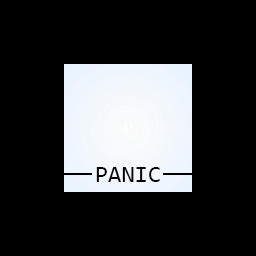
<style>
.page{position:relative;width:256px;height:256px;background:#000000}
.page>*{position:absolute;margin:0}
.t1{font:24px "Consolas";color:#000000}
</style>
<div class="page">
<p class="t1" style="left:96px;top:167px;width:64px;height:15px">PANIC</p>
</div>
